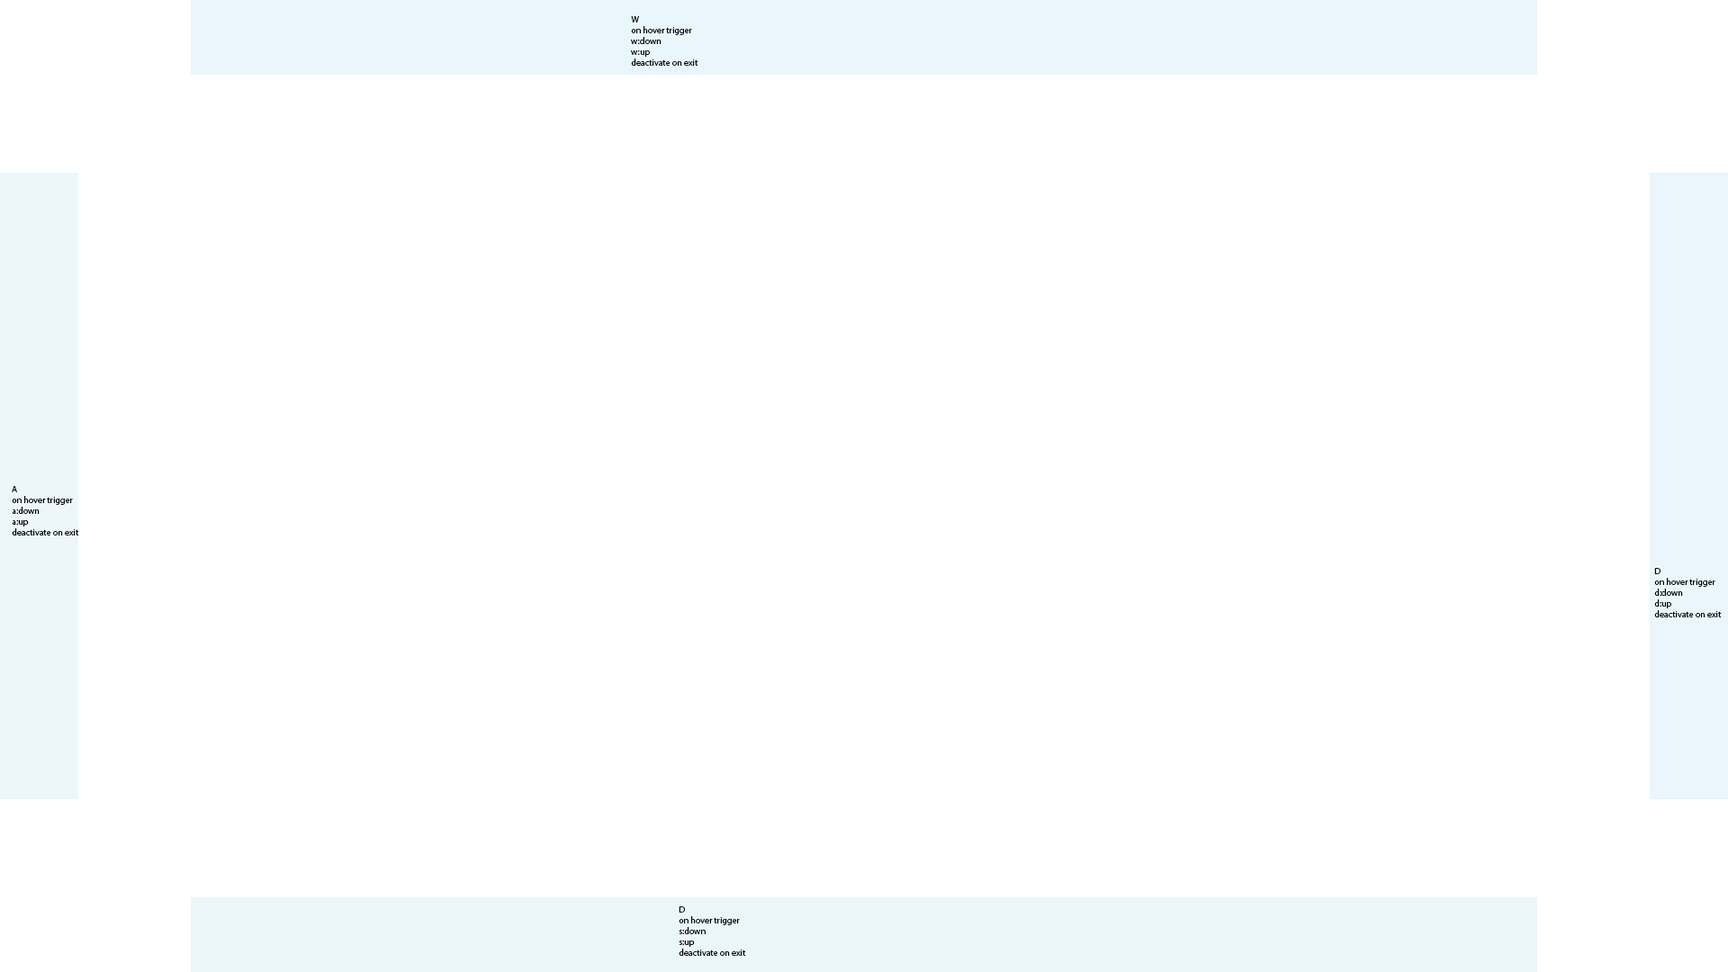
<style>
.page{position:relative;width:1728px;height:972px;background:#ffffff}
.page>*{position:absolute;margin:0}
.t1{font:9px "MyriadPro-Regular";color:#000000}
</style>
<div class="page">
<p class="t1" style="left:631px;top:16px;width:67px;height:50px">W<br>on hover trigger<br>w:down<br>w:up<br>deactivate on exit</p>
<p class="t1" style="left:12px;top:486px;width:67px;height:50px">A<br>on hover trigger<br>a:down<br>a:up<br>deactivate on exit</p>
<p class="t1" style="left:1654px;top:568px;width:68px;height:49px">D<br>on hover trigger<br>d:down<br>d:up<br>deactivate on exit</p>
<p class="t1" style="left:679px;top:906px;width:67px;height:50px">D<br>on hover trigger<br>s:down<br>s:up<br>deactivate on exit</p>
</div>
